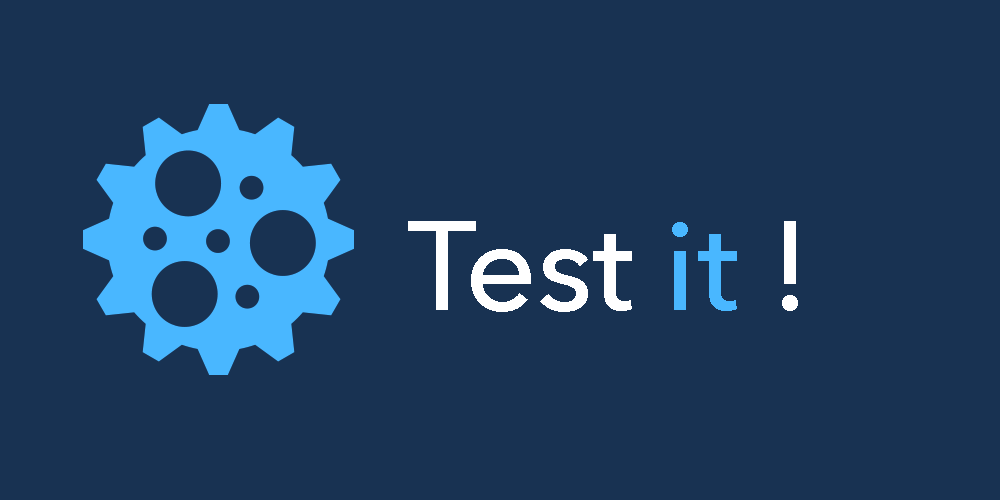
<style>
.page{position:relative;width:1000px;height:500px;background:#183252}
.page>*{position:absolute;margin:0}
.t1{font:125px "AvenirNext-Medium";color:#ffffff}
.t2{font:125px "AvenirNext-Medium";color:#49b7ff}
</style>
<div class="page">
<p class="t1" style="left:408px;top:221px;width:390px;height:91px">Test <span class="t2">it</span> !</p>
</div>
